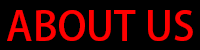
<style>
.page{position:relative;width:200px;height:50px;background:#000000}
.page>*{position:absolute;margin:0}
.t1{font:40.1px "AdobeHeitiStd-Regular";color:#ff0000}
</style>
<div class="page">
<p class="t1" style="left:7px;top:10px;width:186px;height:31px">ABOUT US</p>
</div>
